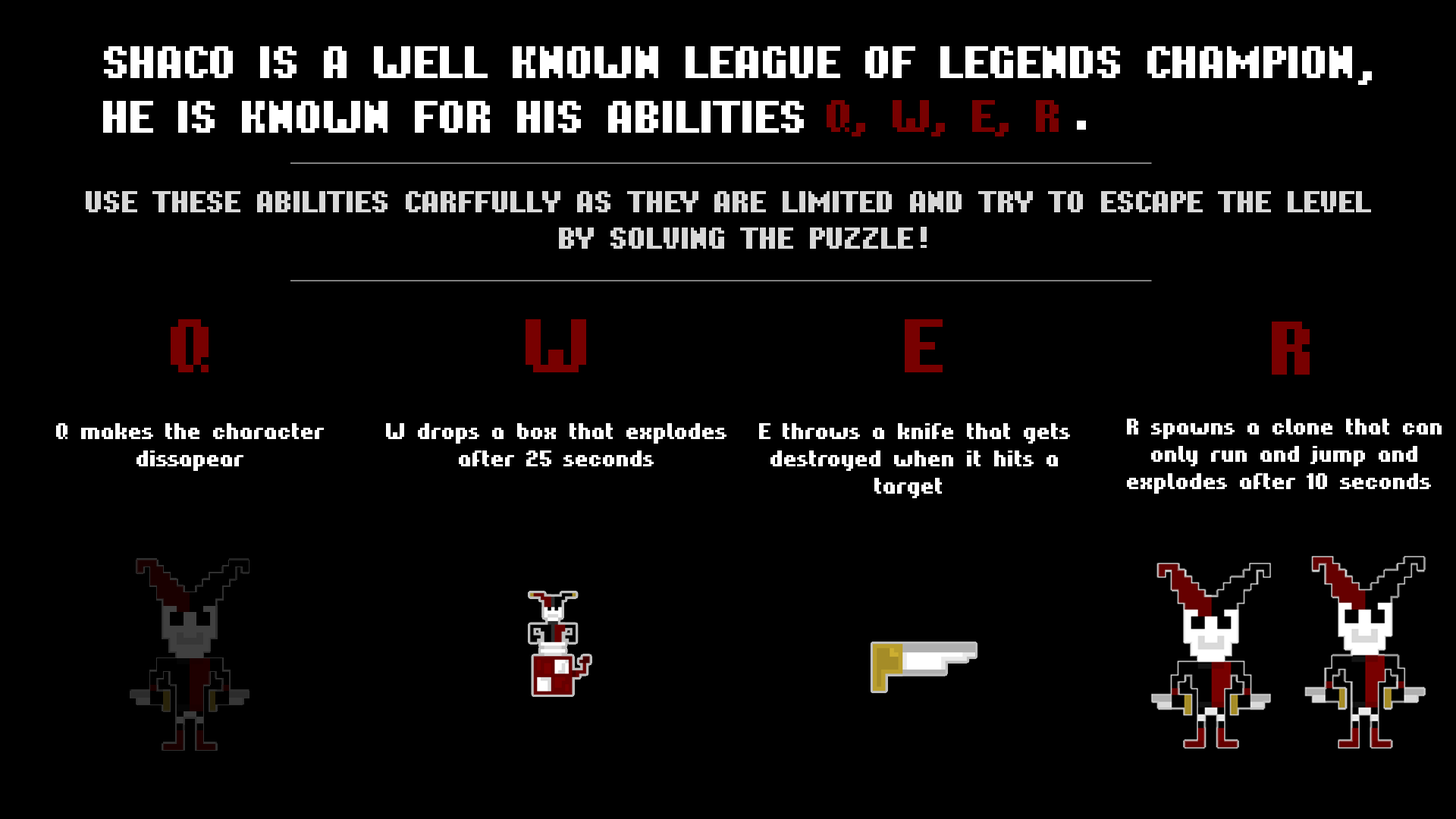
<style>
.page{position:relative;width:1456px;height:819px;background:#000000}
.page>*{position:absolute;margin:0}
.t1{font:45.5px "Hardpixel";color:#ffffff}
.t2{font:45.5px "Hardpixel";color:#780000}
.t3{font:30.3px "Hardpixel";color:#d7d7d7}
.t4{font:75.8px "Hardpixel";color:#780000}
.t5{font:22.7px "Hardpixel";color:#ffffff}
</style>
<div class="page">
<p class="t1" style="left:103px;top:46px;width:1249px;height:87px;text-align:right">SHACO IS A WELL KNOWN LEAGUE OF LEGENDS CHAMPION<br>HE IS KNOWN FOR HIS ABILITIES</p>
<p class="t1" style="left:1358px;top:71px;width:14px;height:14px">,</p>
<p class="t2" style="left:827px;top:100px;width:232px;height:36px">Q, W, E, R</p>
<p class="t3" style="left:86px;top:191px;width:1285px;height:58px;text-align:center">USE THESE ABILITIES CARFFULLY AS THEY ARE LIMITED AND TRY TO ESCAPE THE LEVEL<br>BY SOLVING THE PUZZLE</p>
<p class="t3" style="left:921px;top:227px;width:6px;height:21px">!</p>
<p class="t4" style="left:171px;top:319px;width:38px;height:53px">Q</p>
<p class="t4" style="left:526px;top:319px;width:60px;height:53px">W</p>
<p class="t4" style="left:905px;top:319px;width:38px;height:53px">E</p>
<p class="t4" style="left:1272px;top:322px;width:38px;height:53px">R</p>
<p class="t5" style="left:56px;top:423px;width:268px;height:48px;text-align:center">Q makes the character<br>dissapear</p>
<p class="t5" style="left:386px;top:423px;width:340px;height:43px;text-align:center">W drops a box that explodes<br>after 25 seconds</p>
<p class="t5" style="left:759px;top:423px;width:311px;height:75px;text-align:center">E throws a knife that gets <br>destroyed when it hits a <br>target</p>
<p class="t5" style="left:1127px;top:419px;width:315px;height:75px;text-align:center">R spawns a clone that can <br>only run and jump and <br>explodes after 10 seconds</p>
</div>
